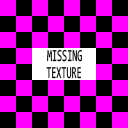
<style>
.page{position:relative;width:128px;height:128px;background:#000000}
.page>*{position:absolute;margin:0}
.t1{font:17px "Consolas";color:#000000;scale:0.54 1}
</style>
<div class="page">
<p class="t1" style="left:47px;top:49px;width:35px;height:13px">MISSING</p>
<p class="t1" style="left:46px;top:67px;width:35px;height:12px">TEXTURE</p>
</div>
